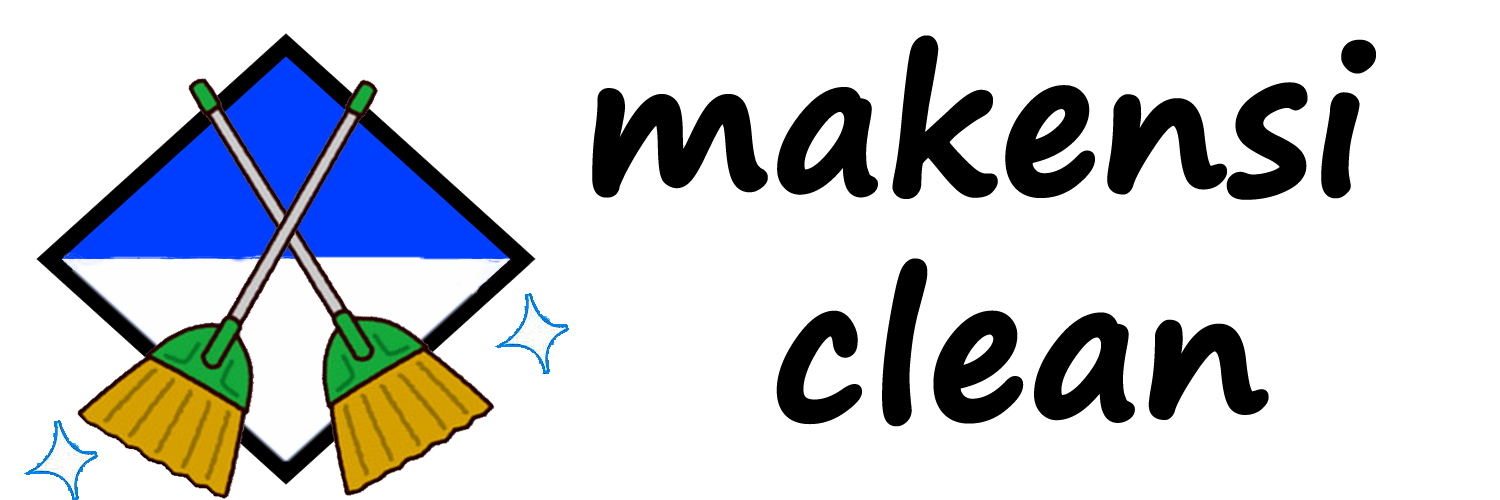
<style>
.page{position:relative;width:1500px;height:500px;background:#ffffff}
.page>*{position:absolute;margin:0}
.t1{font:187.9px "SegoePrint-Bold";color:#000000;font-weight:bold}
.t2{font:112.8px "SegoePrint";color:#000000;font-weight:bold}
</style>
<div class="page">
<p class="t1" style="left:592px;top:35px;width:784px;height:392px"><span class="t2"> </span>makensi<br>   clean</p>
</div>
